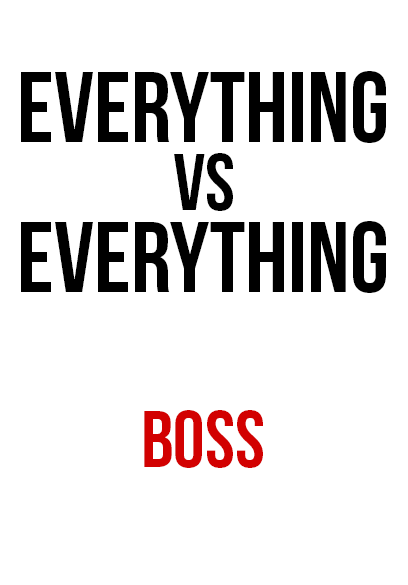
<style>
.page{position:relative;width:408px;height:585px;background:#ffffff}
.page>*{position:absolute;margin:0}
.t1{font:100px "BebasNeue";color:#000000}
.t2{font:80px "BebasNeue";color:#000000}
.t3{font:80px "BebasNeue";color:#d20101}
</style>
<div class="page">
<p class="t1" style="left:21px;top:71px;width:365px;height:72px">everything</p>
<p class="t2" style="left:174px;top:153px;width:59px;height:58px">vs</p>
<p class="t1" style="left:21px;top:221px;width:365px;height:72px">everything</p>
<p class="t3" style="left:144px;top:410px;width:119px;height:58px">boss</p>
</div>
